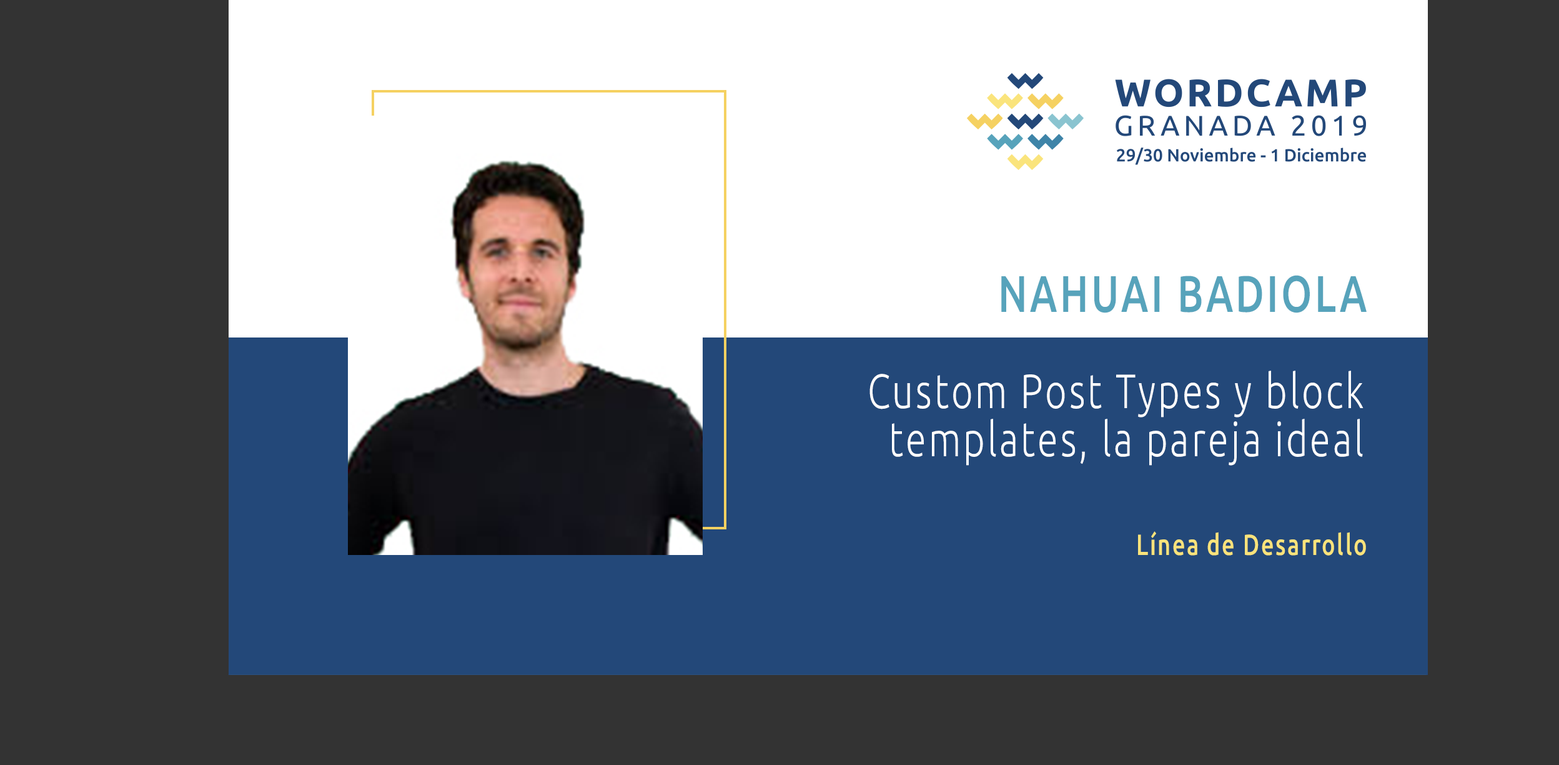
<style>
.page{position:relative;width:1559px;height:765px;background:#ffffff}
.page>*{position:absolute;margin:0}
.t1{font:51.4px "Ubuntu-Medium";letter-spacing:0.068em;color:#57a3bb;text-transform:uppercase;scale:0.77 1}
.t2{font:48.2px/48.2px "Ubuntu-Light";letter-spacing:0.068em;color:#ffffff;scale:0.77 1}
.t3{font:29.2px "Ubuntu-Medium";letter-spacing:0.068em;color:#f9e37b;scale:0.77 1}
</style>
<div class="page">
<p class="t1" style="left:1001px;top:275px;width:366px;height:38px">Nahuai Badiola</p>
<p class="t2" style="left:870px;top:370px;width:494px;height:95px;text-align:right">Custom Post Types y block templates, la pareja ideal</p>
<p class="t3" style="left:1138px;top:531px;width:228px;height:24px">Línea de Desarrollo</p>
</div>
